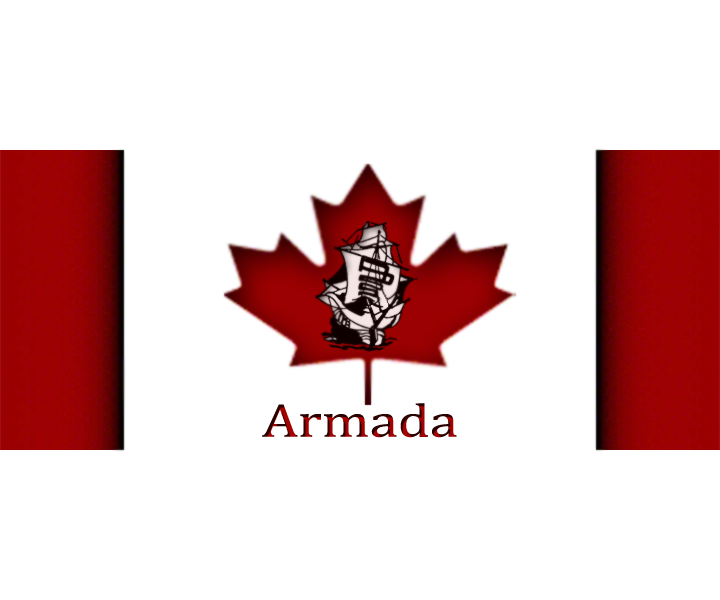
<style>
.page{position:relative;width:720px;height:600px;background:#ffffff}
.page>*{position:absolute;margin:0}
.t1{font:47.7px "CambriaMath";scale:1.21 1}
</style>
<div class="page">
<p class="t1" style="left:262px;top:403px;width:195px;height:35px">Armada</p>
</div>
